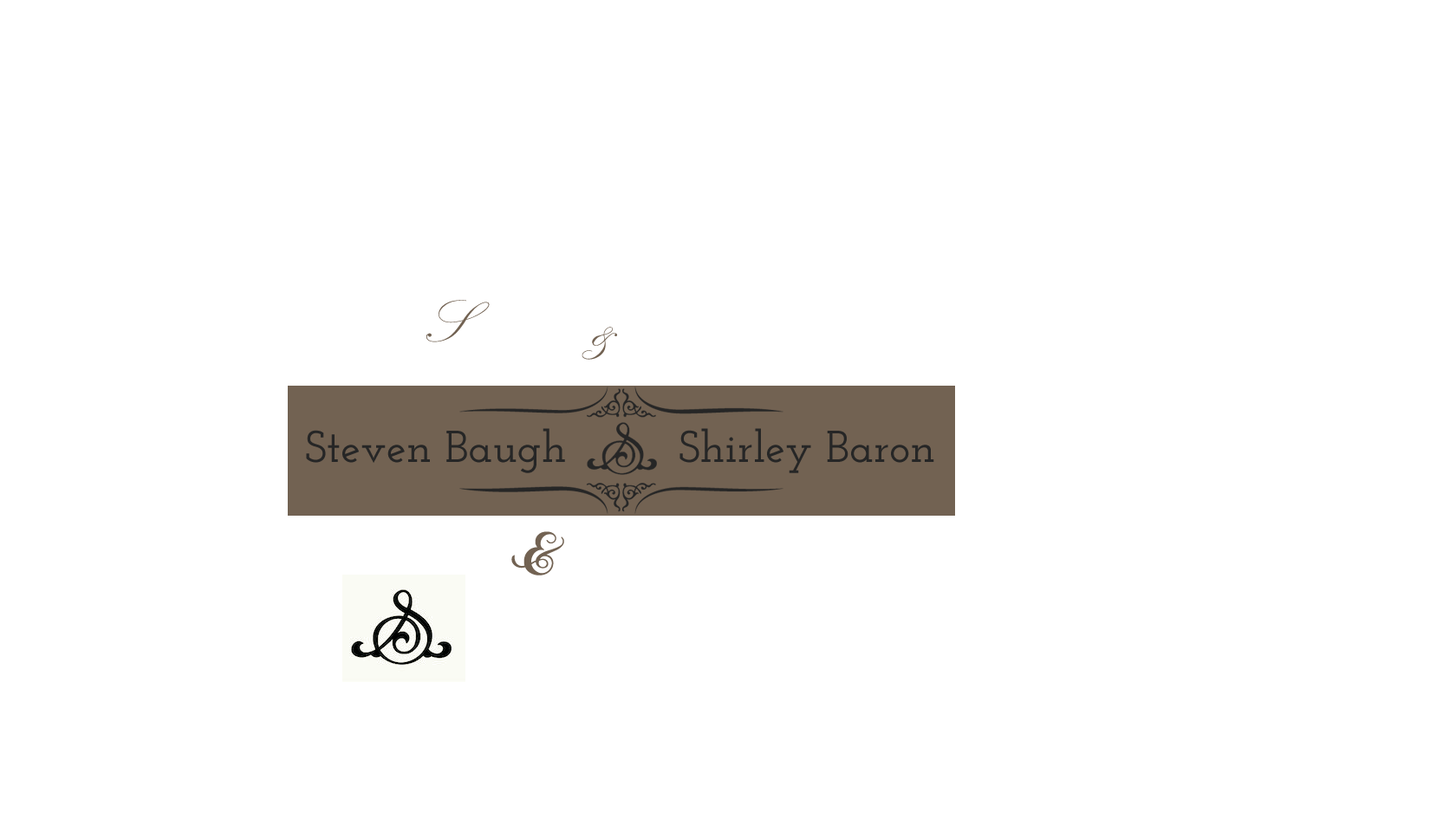
<style>
.page{position:relative;width:1456px;height:819px;background:#ffffff}
.page>*{position:absolute;margin:0}
.t1{font:60.7px "KunstlerScript";color:#726252;font-variant:small-caps}
.t2{font:44.5px "JosefinSlab-SemiBold";color:#262626}
.t3{font:60.7px "ChopinScript";color:#726252;font-variant:small-caps}
</style>
<div class="page">
<p class="t1" style="left:426px;top:300px;width:64px;height:42px">S</p>
<p class="t1" style="left:582px;top:327px;width:36px;height:33px">&amp;</p>
<p class="t2" style="left:306px;top:428px;width:259px;height:45px">Steven Baugh</p>
<p class="t2" style="left:679px;top:428px;width:255px;height:45px">Shirley Baron</p>
<p class="t3" style="left:511px;top:531px;width:53px;height:44px">&amp;</p>
</div>
